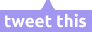
<style>
.page{position:relative;width:92px;height:32px;background:#a196f0}
.page>*{position:absolute;margin:0}
.t1{font:17px "Ubuntu-Bold";color:#ffffff}
</style>
<div class="page">
<p class="t1" style="left:5px;top:13px;width:81px;height:15px">tweet this</p>
</div>
